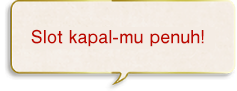
<style>
.page{position:relative;width:237px;height:91px}
.page>*{position:absolute;margin:0}
.t1{font:18px "FutoGoB101Pr5-Bold";color:#bd0800}
</style>
<div class="page">
<p class="t1" style="left:31px;top:29px;width:173px;height:18px">Slot kapal-mu penuh!</p>
</div>
